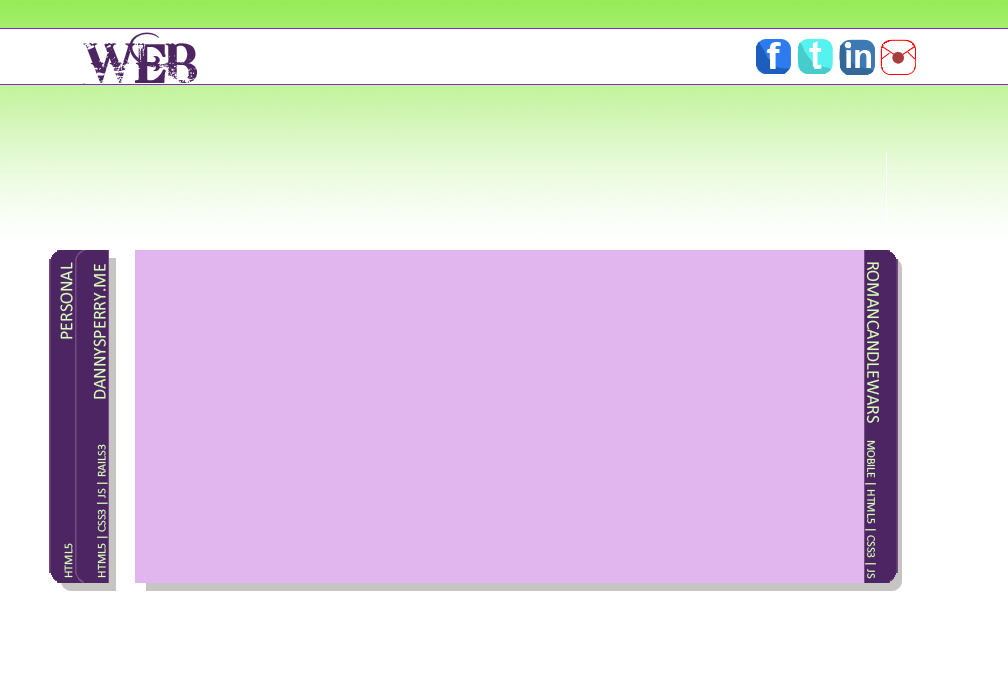
<style>
.page{position:relative;width:1008px;height:679px;background:#e1b6ee}
.page>*{position:absolute;margin:0}
.t1{font:55px "BleedingCowboys";color:#4d2562}
.t2{font:18px "Calibri";color:#d7ffb9}
.t3{font:12px "Calibri";color:#d7ffb9}
</style>
<div class="page">
<p class="t1" style="left:82px;top:32px;width:115px;height:52px">WEB</p>
<p class="t2" style="left:60px;top:262px;width:13px;height:316px;rotate:-90deg"><span class="t3">HTML5               </span>PERSONAL</p>
<p class="t3" style="left:93px;top:264px;width:15px;height:314px;rotate:-90deg">HTML5 | CSS3 | JS | RAILS3        <span class="t2">  DANNYSPERRY.ME</span></p>
<p class="t3" style="left:865px;top:262px;width:15px;height:317px;rotate:90deg"><span class="t2">ROMANCANDLEWARS    </span>MOBILE | HTML5 | CSS3 | JS</p>
</div>
